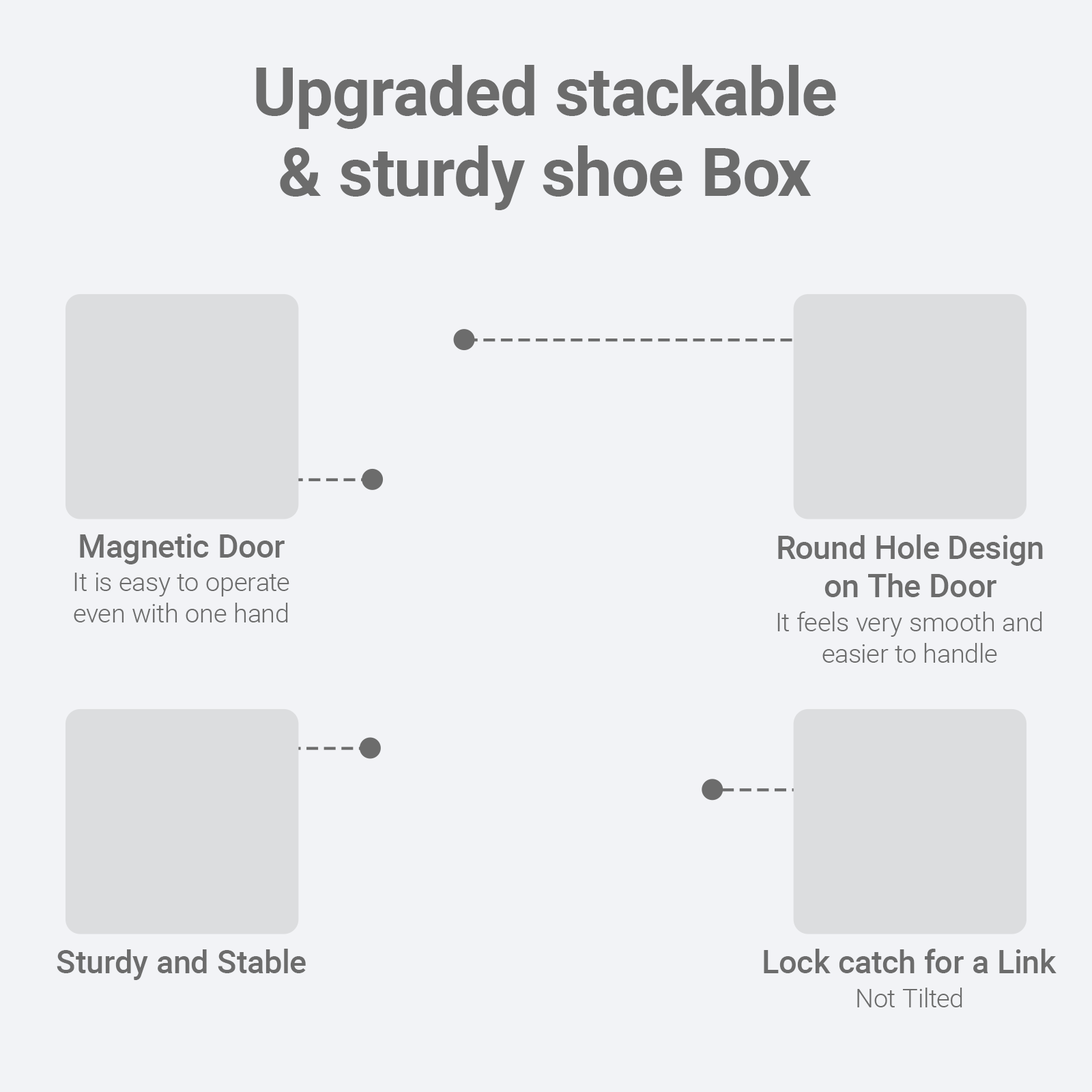
<style>
.page{position:relative;width:1092px;height:1092px;background:#f2f3f6}
.page>*{position:absolute;margin:0}
.t1{font:67px "Roboto-Bold";color:#6c6c6c}
.t2{font:32px "Roboto-Medium";color:#6c6c6c}
.t3{font:26.2px "Roboto-Light";color:#6c6c6c}
</style>
<div class="page">
<p class="t1" style="left:256px;top:65px;width:580px;height:145px;text-align:center">Upgraded stackable<br>&amp; sturdy shoe Box</p>
<p class="t2" style="left:80px;top:534px;width:205px;height:30px">Magnetic Door</p>
<p class="t2" style="left:778px;top:534px;width:265px;height:63px;text-align:center">Round Hole Design<br>on The Door</p>
<p class="t3" style="left:74px;top:573px;width:215px;height:49px;text-align:center">It is easy to operate<br>even with one hand</p>
<p class="t3" style="left:777px;top:612px;width:265px;height:51px;text-align:center">It feels very smooth and<br>easier to handle</p>
<p class="t2" style="left:57px;top:949px;width:249px;height:31px">Sturdy and Stable</p>
<p class="t2" style="left:764px;top:949px;width:292px;height:24px">Lock catch for a Link</p>
<p class="t3" style="left:857px;top:988px;width:105px;height:19px">Not Tilted</p>
</div>
